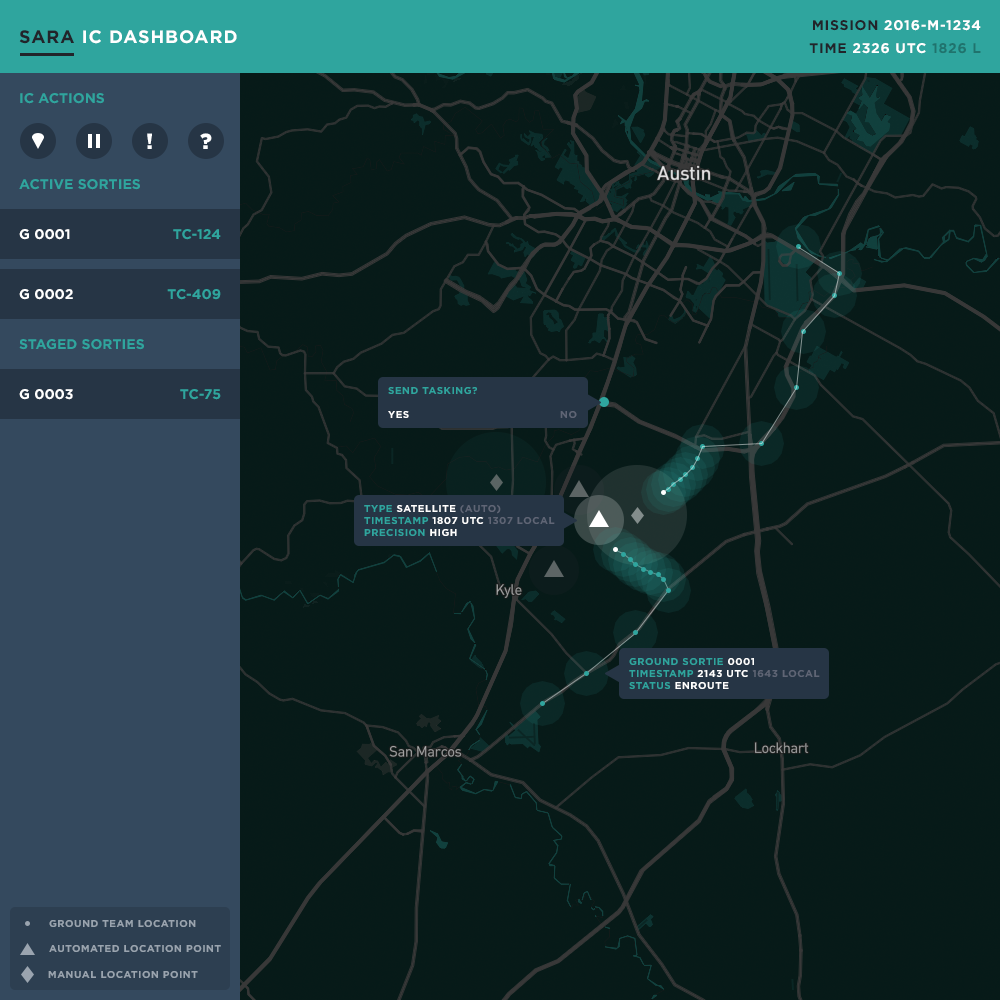
<style>
.page{position:relative;width:1000px;height:1000px;background:#071a18}
.page>*{position:absolute;margin:0}
.t1{font:18px "Gotham-Bold";letter-spacing:0.05em;color:#ffffff;text-transform:uppercase}
.t2{font:18px "Gotham-Bold";letter-spacing:0.05em;color:#22242a;text-transform:uppercase}
.t3{font:14px "Gotham-Bold";letter-spacing:0.05em;color:#ffffff;text-transform:uppercase}
.t4{font:14px "Gotham-Bold";letter-spacing:0.05em;color:#22242a;text-transform:uppercase}
.t5{font:14px "Gotham-Bold";letter-spacing:0.05em;color:#20736d;text-transform:uppercase}
.t6{font:14px "Gotham-Bold";color:#2fa59e;text-transform:uppercase}
.t7{font:14px "Gotham-Bold";color:#ffffff;text-transform:uppercase}
.t8{font:10px "Gotham-Bold";letter-spacing:0.05em;color:#2fa59e;text-transform:uppercase}
.t9{font:10px "Gotham-Bold";letter-spacing:0.05em;color:#ffffff;text-transform:uppercase}
.t10{font:10px "Gotham-Bold";letter-spacing:0.05em;color:#5f6575;text-transform:uppercase}
.t11{font:10px "Gotham-Bold";letter-spacing:0.05em;color:#9aa4af;text-transform:uppercase}
</style>
<div class="page">
<p class="t1" style="left:19px;top:30px;width:218px;height:14px"><span class="t2">SARA </span>IC Dashboard</p>
<p class="t3" style="left:813px;top:20px;width:168px;height:11px"><span class="t4">Mission </span>2016-M-1234</p>
<p class="t3" style="left:809px;top:43px;width:172px;height:11px"><span class="t4">Time </span>2326 UTC <span class="t5">1826 L</span></p>
<p class="t6" style="left:20px;top:93px;width:84px;height:11px">IC ACTIONS</p>
<p class="t6" style="left:19px;top:179px;width:121px;height:11px">ACTIVE SORTIES</p>
<p class="t7" style="left:19px;top:229px;width:51px;height:11px">G 0001</p>
<p class="t6" style="left:173px;top:229px;width:48px;height:11px">TC-124</p>
<p class="t7" style="left:19px;top:289px;width:54px;height:11px">G 0002</p>
<p class="t6" style="left:167px;top:289px;width:54px;height:11px">TC-409</p>
<p class="t6" style="left:19px;top:339px;width:125px;height:11px">STAGED SORTIES</p>
<p class="t7" style="left:19px;top:389px;width:54px;height:11px">G 0003</p>
<p class="t6" style="left:180px;top:389px;width:41px;height:11px">TC-75</p>
<p class="t8" style="left:388px;top:387px;width:189px;height:31px">send tasking?<br><span class="t9"><br>Yes</span><span class="t10">            NO</span></p>
<p class="t10" style="left:364px;top:504px;width:191px;height:32px"><span class="t8">TYPE </span><span class="t9">SATELLITE</span> (AUTO)<br><span class="t8">timestamp </span><span class="t9">1807 UTC</span> 1307 LOCAL<br><span class="t8">precision </span><span class="t9">high</span></p>
<p class="t8" style="left:629px;top:658px;width:191px;height:31px">ground SORTIE <span class="t9">0001<br></span>timestamp <span class="t9">2143 UTC</span><span class="t10"> 1643 LOCAL<br></span>STATUS <span class="t9">ENROUTE</span></p>
<p class="t11" style="left:49px;top:920px;width:147px;height:7px">Ground Team Location</p>
<p class="t11" style="left:49px;top:945px;width:172px;height:7px">Automated Location Point</p>
<p class="t11" style="left:48px;top:971px;width:150px;height:7px">manual location point</p>
</div>
